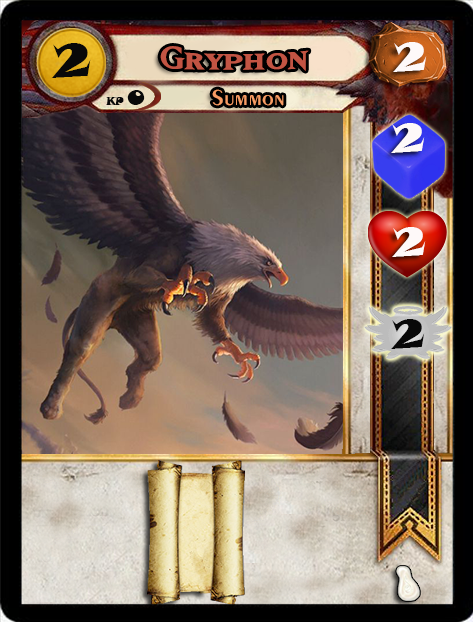
<style>
.page{position:relative;width:473px;height:622px}
.page>*{position:absolute;margin:0}
.t1{font:46.6px "SnapITC-Regular";color:#090909;scale:1.05 1}
.t2{font:40px "MatrixBoldSmallCaps";color:#c25443;scale:1.06 1}
.t3{font:40px "SnapITC-Regular";color:#fef9f9;scale:1.05 1}
.t4{font:22.7px "Exotic350BT-DemiBold";color:#f89c64;scale:1.06 1}
.t5{font:20.5px "SnapITC-Regular";color:#090909}
.t6{font:40px "SnapITC-Regular";color:#090909;scale:1.05 1}
</style>
<div class="page">
<p class="t1" style="left:51px;top:43px;width:40px;height:35px">2</p>
<p class="t2" style="left:160px;top:46px;width:149px;height:25px">Gryphon</p>
<p class="t3" style="left:393px;top:42px;width:34px;height:30px">2</p>
<p class="t4" style="left:212px;top:89px;width:72px;height:17px">Summon</p>
<p class="t5" style="left:127px;top:90px;width:18px;height:15px">0</p>
<p class="t3" style="left:391px;top:123px;width:34px;height:30px">2</p>
<p class="t3" style="left:392px;top:227px;width:34px;height:30px">2</p>
<p class="t6" style="left:391px;top:319px;width:34px;height:30px">2</p>
</div>
